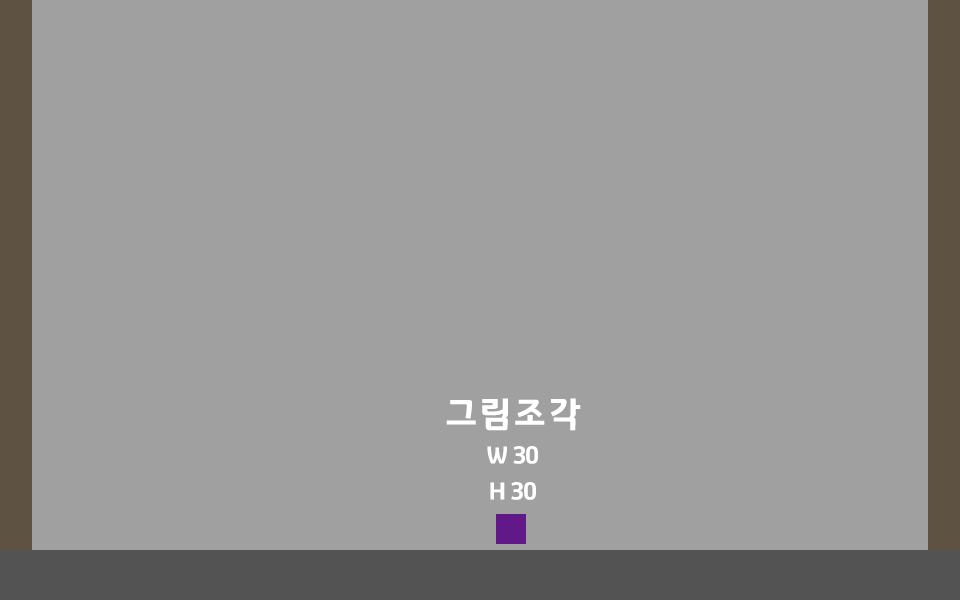
<style>
.page{position:relative;width:960px;height:600px;background:#a0a0a0}
.page>*{position:absolute;margin:0}
.t1{font:24px/36px "GyeonggiTitleV";letter-spacing:-0.05em;color:#ffffff}
.t2{font:36px/12px "GyeonggiTitleV";letter-spacing:-0.05em;color:#ffffff}
</style>
<div class="page">
<p class="t1" style="left:446px;top:398px;width:135px;height:102px;text-align:center"><span class="t2">그림조각<br><br><br><br></span>W 30<br>H 30</p>
</div>
